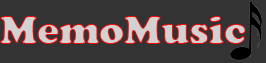
<style>
.page{position:relative;width:266px;height:63px;background:#333333}
.page>*{position:absolute;margin:0}
.t1{font:41.7px "CooperBlack";color:#d2d2d2}
</style>
<div class="page">
<p class="t1" style="left:0px;top:16px;width:246px;height:28px">MemoMusic</p>
</div>
